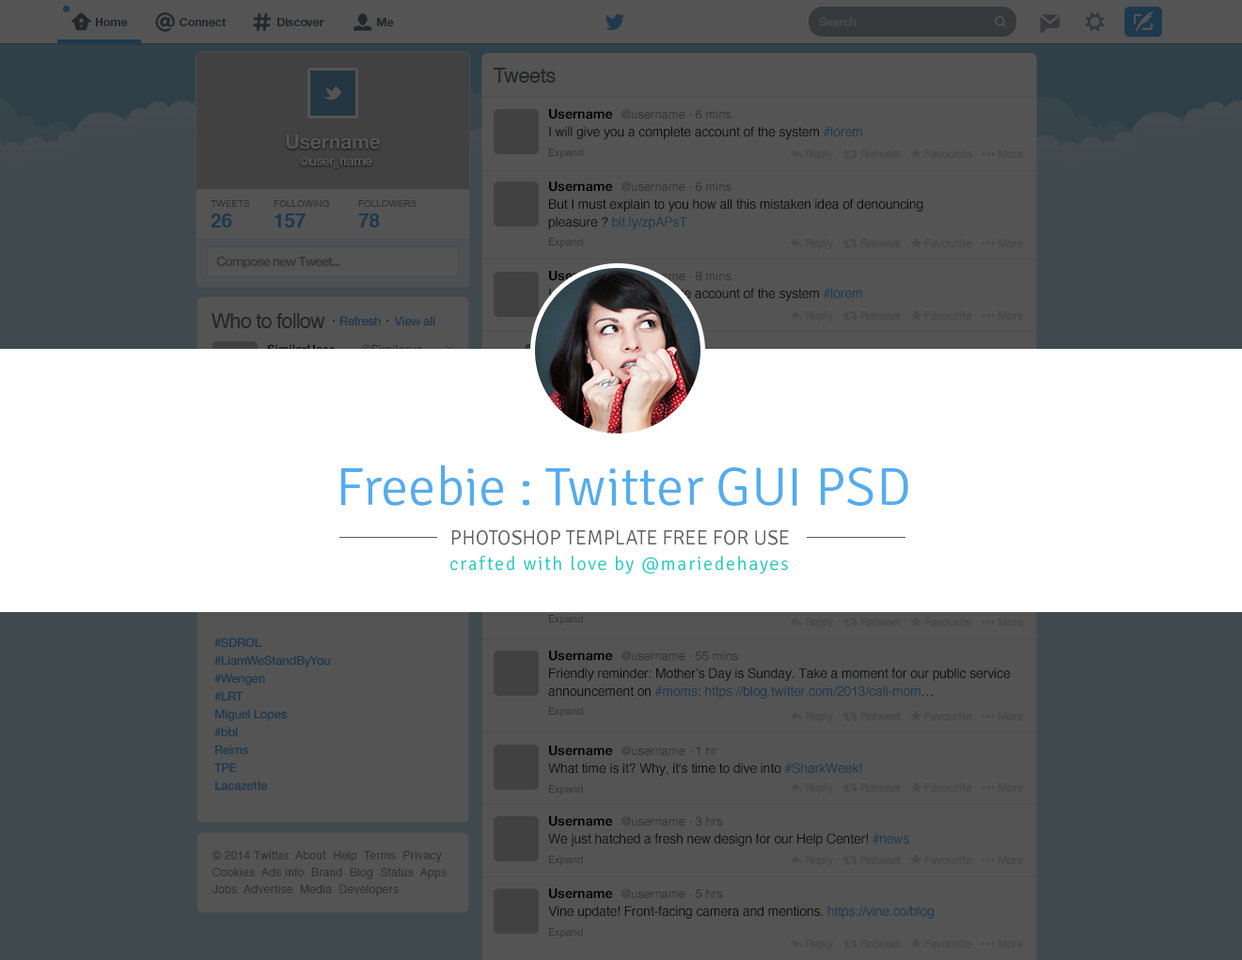
<style>
.page{position:relative;width:1242px;height:960px;background:#545454}
.page>*{position:absolute;margin:0}
.t1{font:11.6px "HelveticaNeueLTPro-Bd";letter-spacing:-0.025em;color:#22272a}
.t2{font:12.2px "HelveticaNeueLTPro-Bd";letter-spacing:-0.05em;color:#47494a}
.t3{font:20.7px "Helvetica";letter-spacing:-0.025em;color:#22272a}
.t4{font:13.2px "HelveticaNeue-Bold";color:#010101}
.t5{font:12.2px "HelveticaNeue";color:#323232}
.t6{font:13.2px "Helvetica";letter-spacing:-0.01em;color:#0e0f11}
.t7{font:19.7px "HelveticaNeue-Bold";letter-spacing:-0.005em;color:#545454}
.t8{font:10.3px "HelveticaNeue";color:#323232}
.t9{font:13.1px "HelveticaNeueLTPro-Bd";letter-spacing:-0.05em;color:#545454}
.t10{font:9.4px "ArialMT";letter-spacing:-0.005em;color:#323232;text-transform:uppercase}
.t11{font:9.5px "ArialMT";letter-spacing:-0.005em;color:#323232;text-transform:uppercase}
.t12{font:13.2px/17.9px "Helvetica";letter-spacing:-0.01em;color:#0e0f11}
.t13{font:19.8px "Helvetica-Bold";letter-spacing:-0.005em;color:#1c394e;text-transform:uppercase}
.t14{font:13.2px "HelveticaNeue-Bold";letter-spacing:-0.075em;color:#383838}
.t15{font:20.7px "Helvetica";letter-spacing:-0.04em;color:#22272a}
.t16{font:12.2px "HelveticaNeue-Medium";letter-spacing:-0.025em;color:#1c394e}
.t17{font:12.2px "HelveticaNeue-Medium";letter-spacing:-0.025em;color:#0d0d0d}
.t18{font:12.2px "HelveticaNeue";color:#2d2e33}
.t19{font:54.3px "Signika-Light";color:#55acee}
.t20{font:20.7px "Signika-Light";color:#5e5e5e;text-transform:uppercase}
.t21{font:18.8px "Signika-Light";letter-spacing:0.09em;color:#27ccc0}
.t22{font:12.2px "HelveticaNeue";color:#27ccc0}
.t23{font:12.2px/17.9px "HelveticaNeue-Medium";letter-spacing:-0.025em;color:#1c394e}
.t24{font:13.2px/17.9px "Helvetica";letter-spacing:-0.01em}
.t25{font:11.3px/16.9px "Helvetica";letter-spacing:0.025em;color:#323232}
</style>
<div class="page">
<p class="t1" style="left:96px;top:18px;width:32px;height:8px">Home</p>
<p class="t1" style="left:180px;top:18px;width:46px;height:8px">Connect</p>
<p class="t1" style="left:277px;top:18px;width:47px;height:8px">Discover</p>
<p class="t1" style="left:377px;top:18px;width:17px;height:8px">Me</p>
<p class="t2" style="left:819px;top:17px;width:38px;height:9px">Search</p>
<p class="t3" style="left:493px;top:68px;width:63px;height:15px">Tweets</p>
<p class="t4" style="left:549px;top:109px;width:64px;height:10px">Username</p>
<p class="t5" style="left:622px;top:109px;width:110px;height:10px">@username   6 mins</p>
<p class="t5" style="left:690px;top:114px;width:2px;height:2px">.</p>
<p class="t6" style="left:549px;top:126px;width:313px;height:13px">I will give you a complete account of the system #lorem</p>
<p class="t7" style="left:286px;top:134px;width:94px;height:16px">Username</p>
<p class="t8" style="left:549px;top:149px;width:34px;height:10px">Expand</p>
<p class="t9" style="left:299px;top:156px;width:73px;height:11px">@user_name</p>
<p class="t4" style="left:549px;top:181px;width:64px;height:11px">Username</p>
<p class="t5" style="left:622px;top:181px;width:110px;height:11px">@username   6 mins</p>
<p class="t5" style="left:690px;top:186px;width:2px;height:2px">.</p>
<p class="t10" style="left:211px;top:200px;width:39px;height:7px">Tweets</p>
<p class="t11" style="left:274px;top:200px;width:55px;height:7px">following</p>
<p class="t11" style="left:358px;top:200px;width:59px;height:7px">followers</p>
<p class="t12" style="left:548px;top:198px;width:375px;height:31px">But I must explain to you how all this mistaken idea of denouncing pleasure ? bit.ly/zpAPsT</p>
<p class="t13" style="left:211px;top:213px;width:21px;height:15px">26</p>
<p class="t13" style="left:275px;top:213px;width:31px;height:15px">157</p>
<p class="t13" style="left:358px;top:213px;width:22px;height:15px">78</p>
<p class="t8" style="left:549px;top:238px;width:34px;height:10px">Expand</p>
<p class="t14" style="left:216px;top:256px;width:124px;height:13px">Compose new Tweet...</p>
<p class="t5" style="left:690px;top:275px;width:2px;height:2px">.</p>
<p class="t15" style="left:212px;top:313px;width:113px;height:15px">Who to follow</p>
<p class="t16" style="left:339px;top:316px;width:42px;height:10px">Refresh</p>
<p class="t16" style="left:394px;top:316px;width:41px;height:10px">View all</p>
<p class="t17" style="left:333px;top:320px;width:2px;height:2px">.</p>
<p class="t17" style="left:386px;top:320px;width:2px;height:2px">.</p>
<p class="t18" style="left:690px;top:367px;width:2px;height:2px">.</p>
<p class="t19" style="left:341px;top:464px;width:567px;height:42px">Freebie : Twitter GUI PSD</p>
<p class="t20" style="left:452px;top:530px;width:337px;height:15px">Photoshop template free for use</p>
<p class="t21" style="left:450px;top:556px;width:338px;height:18px">crafted with love by @mariedehayes</p>
<p class="t22" style="left:690px;top:563px;width:2px;height:2px">.</p>
<p class="t8" style="left:549px;top:615px;width:34px;height:10px">Expand</p>
<p class="t23" style="left:214px;top:638px;width:116px;height:153px">#SDROL<br>#LiamWeStandByYou<br>#Wengen<br>#LRT<br>Miguel Lopes<br>#bbl<br>Reims<br>TPE<br>Lacazette</p>
<p class="t4" style="left:549px;top:651px;width:64px;height:10px">Username</p>
<p class="t5" style="left:622px;top:651px;width:116px;height:10px">@username   55 mins</p>
<p class="t5" style="left:690px;top:655px;width:2px;height:2px">.</p>
<p class="t24" style="left:548px;top:668px;width:463px;height:31px">Friendly reminder: Mother’s Day is Sunday. Take a moment for our public service announcement on #moms: https://blog.twitter.com/2013/call-mom…</p>
<p class="t8" style="left:549px;top:707px;width:34px;height:10px">Expand</p>
<p class="t4" style="left:549px;top:746px;width:64px;height:10px">Username</p>
<p class="t5" style="left:622px;top:746px;width:94px;height:10px">@username   1 hr</p>
<p class="t5" style="left:690px;top:750px;width:2px;height:2px">.</p>
<p class="t6" style="left:548px;top:763px;width:313px;height:13px">What time is it? Why, it's time to dive into #SharkWeek!</p>
<p class="t8" style="left:549px;top:785px;width:34px;height:10px">Expand</p>
<p class="t4" style="left:549px;top:816px;width:64px;height:10px">Username</p>
<p class="t5" style="left:622px;top:816px;width:101px;height:10px">@username   3 hrs</p>
<p class="t5" style="left:690px;top:821px;width:2px;height:2px">.</p>
<p class="t6" style="left:548px;top:833px;width:361px;height:13px">We just hatched a fresh new design for our Help Center! #news</p>
<p class="t25" style="left:213px;top:851px;width:234px;height:45px">© 2014 Twitter  About  Help  Terms  Privacy<br>Cookies  Ads info  Brand  Blog  Status  Apps<br>Jobs  Advertise  Media  Developers</p>
<p class="t8" style="left:549px;top:856px;width:34px;height:10px">Expand</p>
<p class="t4" style="left:549px;top:889px;width:64px;height:10px">Username</p>
<p class="t5" style="left:622px;top:889px;width:101px;height:10px">@username   5 hrs</p>
<p class="t5" style="left:690px;top:893px;width:2px;height:2px">.</p>
<p class="t6" style="left:548px;top:905px;width:386px;height:14px">Vine update! Front-facing camera and mentions. https://vine.co/blog</p>
<p class="t8" style="left:549px;top:928px;width:34px;height:10px">Expand</p>
</div>
